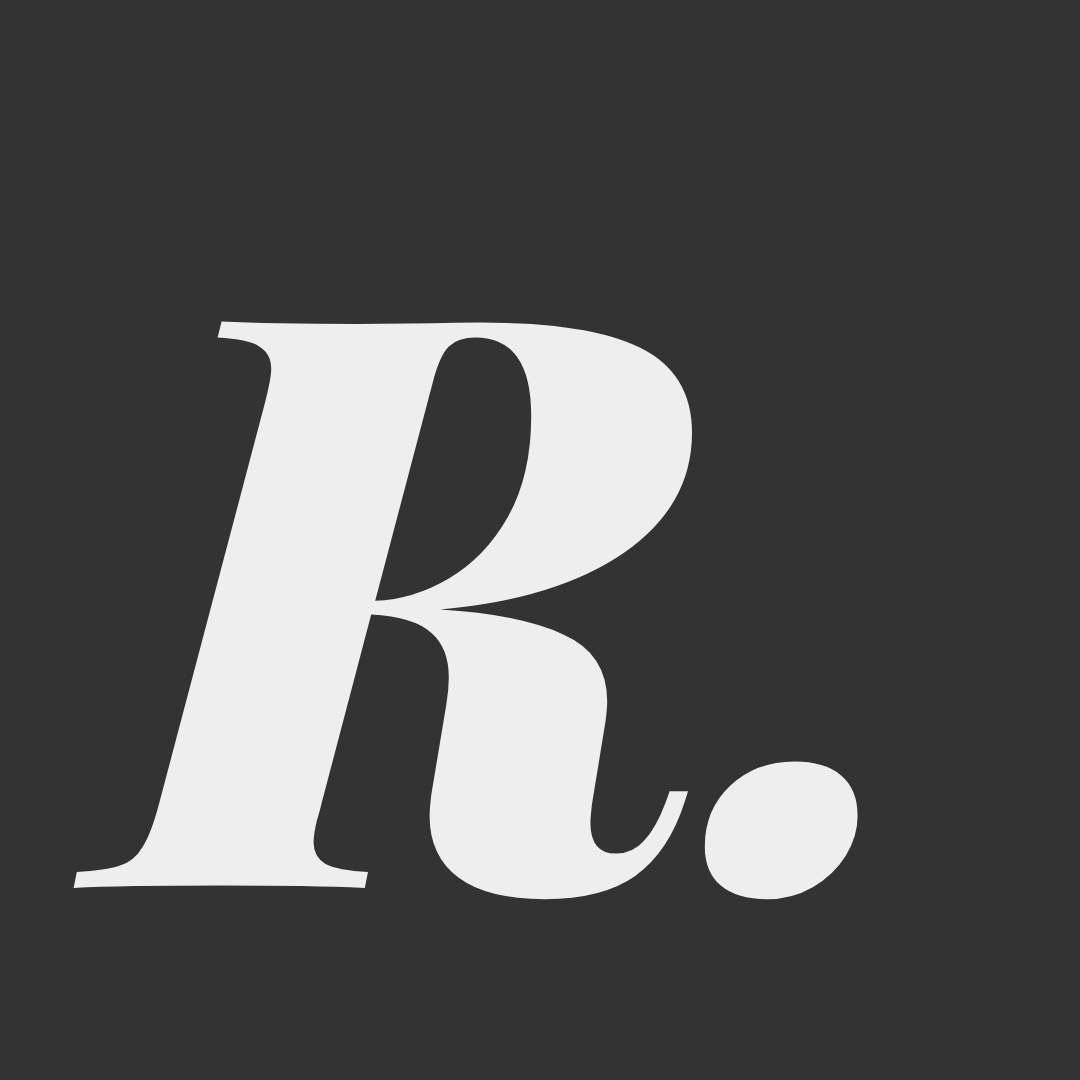
<style>
.page{position:relative;width:1080px;height:1080px;background:#333333}
.page>*{position:absolute;margin:0}
.t1{font:800px "PlayfairDisplay-BlackItalic";color:#eeeeee}
</style>
<div class="page">
<p class="t1" style="left:73px;top:321px;width:785px;height:579px">R.</p>
</div>
